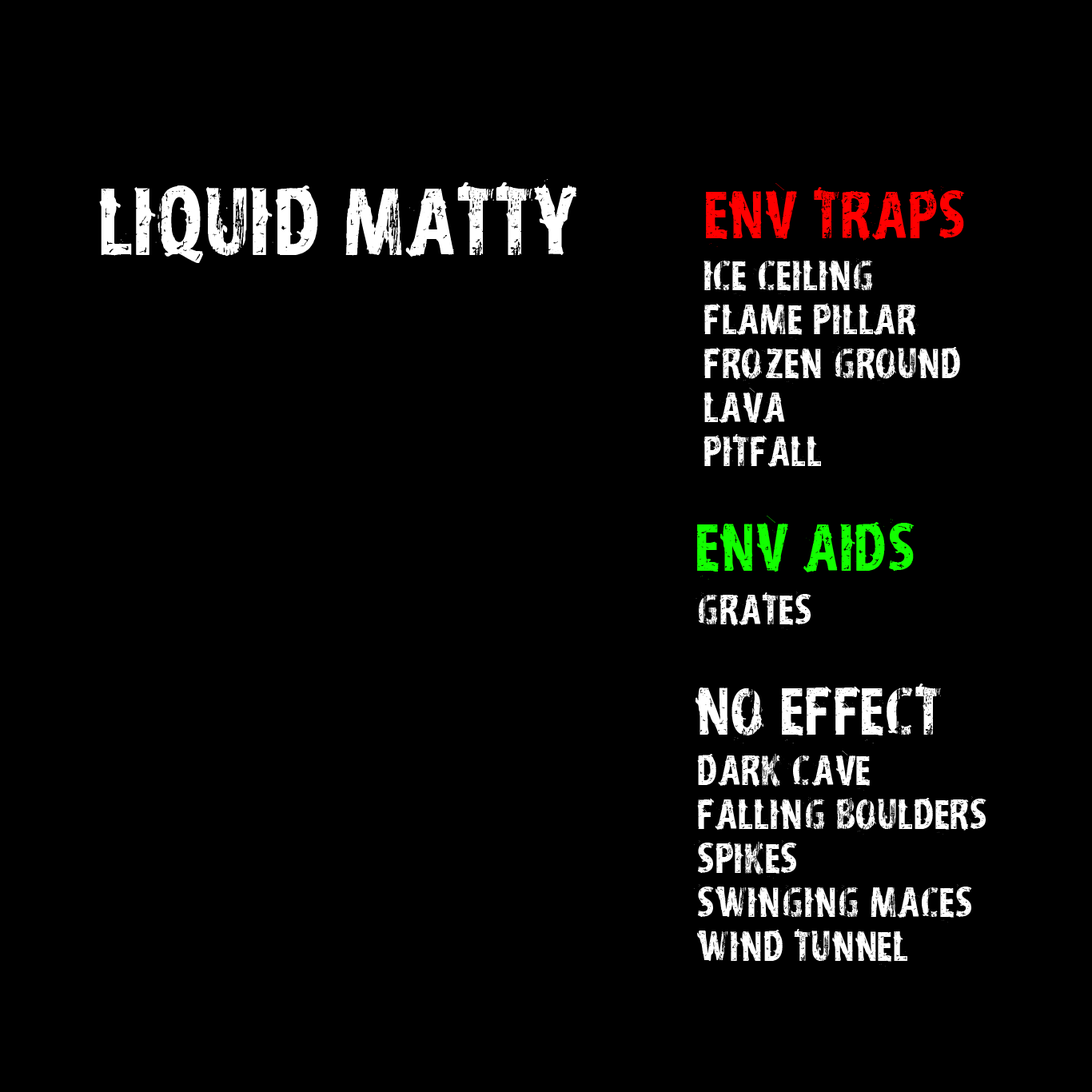
<style>
.page{position:relative;width:1092px;height:1092px;background:#000000}
.page>*{position:absolute;margin:0}
.t1{font:83.5px "vtksdistress";color:#ffffff}
.t2{font:58.4px "vtksdistress";color:#ff0000}
.t3{font:37.2px/44px "vtksdistress";color:#ffffff}
.t4{font:58.4px "vtksdistress";color:#12ff00}
.t5{font:37.2px "vtksdistress";color:#ffffff}
.t6{font:58.4px "vtksdistress";color:#ffffff}
</style>
<div class="page">
<p class="t1" style="left:99px;top:179px;width:477px;height:84px">Liquid matty</p>
<p class="t2" style="left:706px;top:183px;width:259px;height:64px">Env traps</p>
<p class="t3" style="left:703px;top:258px;width:257px;height:209px">Ice Ceiling<br>flame pillar<br>Frozen ground<br>Lava<br>pitfall</p>
<p class="t4" style="left:697px;top:516px;width:218px;height:64px">ENV AIDs</p>
<p class="t5" style="left:695px;top:592px;width:116px;height:38px">Grates</p>
<p class="t6" style="left:695px;top:683px;width:246px;height:60px">No effect</p>
<p class="t3" style="left:694px;top:751px;width:292px;height:215px">dark cave<br>falling boulders<br>spikes<br>swinging maces<br>Wind tunnel</p>
</div>
